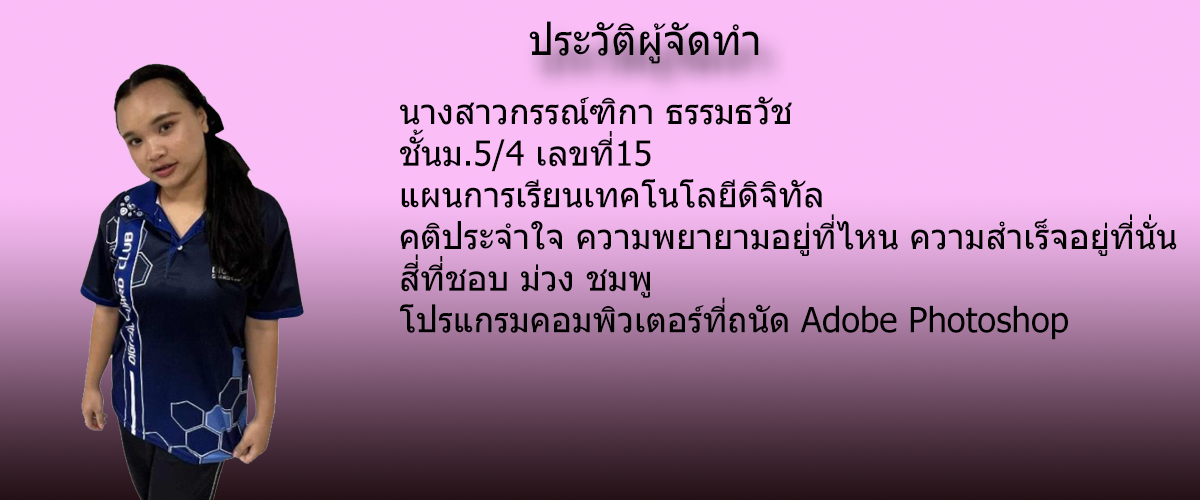
<style>
.page{position:relative;width:1200px;height:500px}
.page>*{position:absolute;margin:0}
.t1{font:41.7px "Tahoma";color:#000000}
.t2{font:34.7px "Tahoma";color:#000000}
</style>
<div class="page">
<p class="t1" style="left:529px;top:21px;width:230px;height:43px">ประวัติผู้จัดทำ</p>
<p class="t2" style="left:400px;top:96px;width:777px;height:244px;text-align:right">นางสาวกรรณ์ฑิกา ธรรมธวัช<br>ชั้นม.5/4 เลขที่15<br>แผนการเรียนเทคโนโลยีดิจิทัล<br>คติประจำใจ ความพยายามอยู่ที่ไหน ความสำเร็จอยู่ที่นั่น<br>สี่ที่ชอบ ม่วง ชมพู<br>โปรแกรมคอมพิวเตอร์ที่ถนัด Adobe Photoshop</p>
</div>
